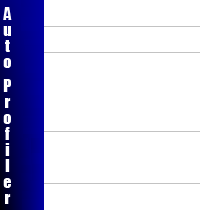
<style>
.page{position:relative;width:200px;height:210px;background:#ffffff}
.page>*{position:absolute;margin:0}
.t1{font:16px "Impact";color:#ffffff}
</style>
<div class="page">
<p class="t1" style="left:3px;top:7px;width:9px;height:197px">Auto   Profiler</p>
</div>
